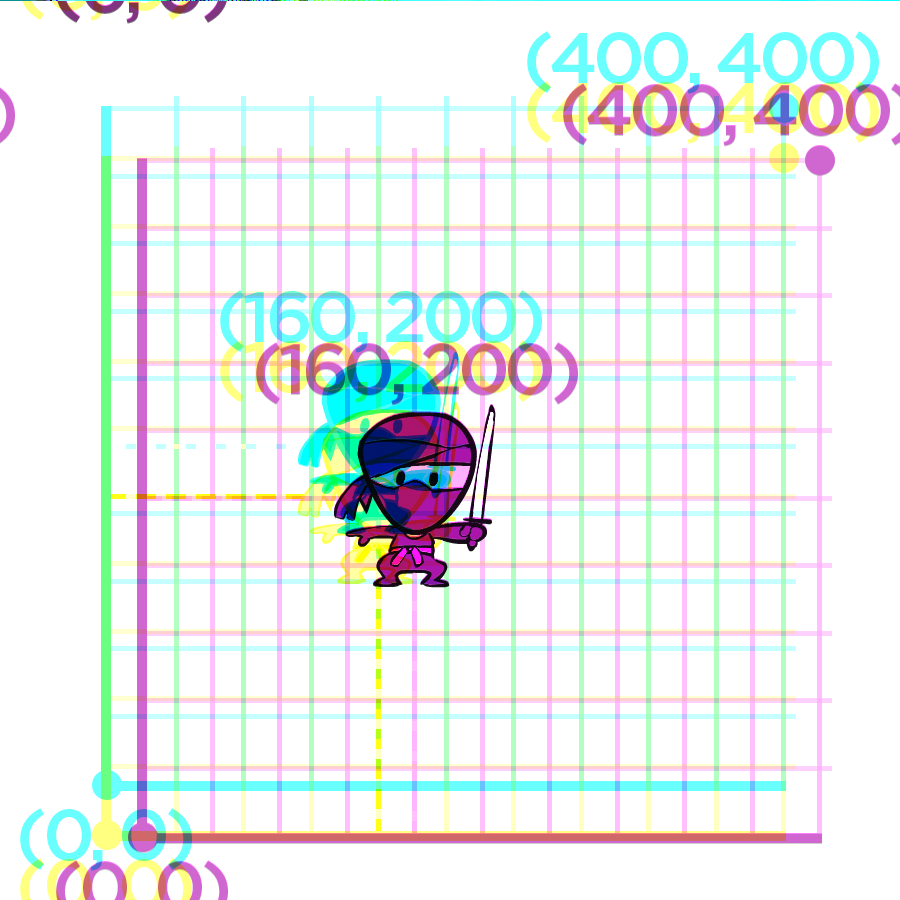
<style>
.page{position:relative;width:900px;height:900px;background:#ffffff}
.page>*{position:absolute;margin:0}
.t1{font:72px "Gotham-Medium";letter-spacing:-0.075em;color:#69ffff}
.t2{font:72px "Gotham-Medium";letter-spacing:-0.075em}
</style>
<div class="page">
<p class="t1" style="left:527px;top:30px;width:352px;height:63px">(400, 400)</p>
<p class="t2" style="left:220px;top:289px;width:322px;height:63px">(160, 200)</p>
<p class="t1" style="left:20px;top:807px;width:172px;height:63px">(0, 0)</p>
</div>
